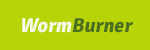
<style>
.page{position:relative;width:150px;height:50px;background:#b6d408}
.page>*{position:absolute;margin:0}
.t1{font:20px "Signika-Bold";color:#4d6f20;font-style:italic}
.t2{font:20px "Signika-Bold";color:#f6f9e5;font-style:italic}
</style>
<div class="page">
<p class="t1" style="left:22px;top:18px;width:112px;height:15px"><span class="t2">Worm</span>Burner</p>
</div>
